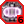
<style>
.page{position:relative;width:24px;height:24px}
.page>*{position:absolute;margin:0}
.t1{font:9px "Montserrat-Bold";color:#000000}
</style>
<div class="page">
<p class="t1" style="left:18px;top:16px;width:6px;height:7px">6</p>
</div>
